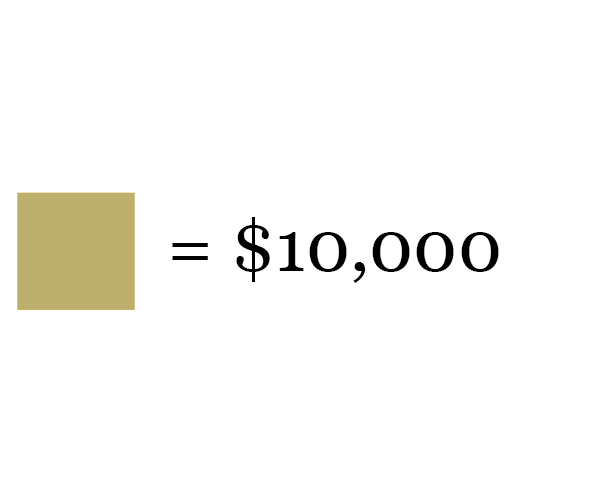
<style>
.page{position:relative;width:600px;height:500px;background:#ffffff}
.page>*{position:absolute;margin:0}
.t1{font:72px "Georgia";color:#000000}
</style>
<div class="page">
<p class="t1" style="left:172px;top:217px;width:327px;height:66px">= $10,000</p>
</div>
